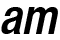
<style>
.page{position:relative;width:60px;height:40px;background:#ffffff}
.page>*{position:absolute;margin:0}
.t1{font:48px "HelveticaCYBoldOblique";color:#000000}
</style>
<div class="page">
<p class="t1" style="left:1px;top:7px;width:57px;height:27px">am</p>
</div>
